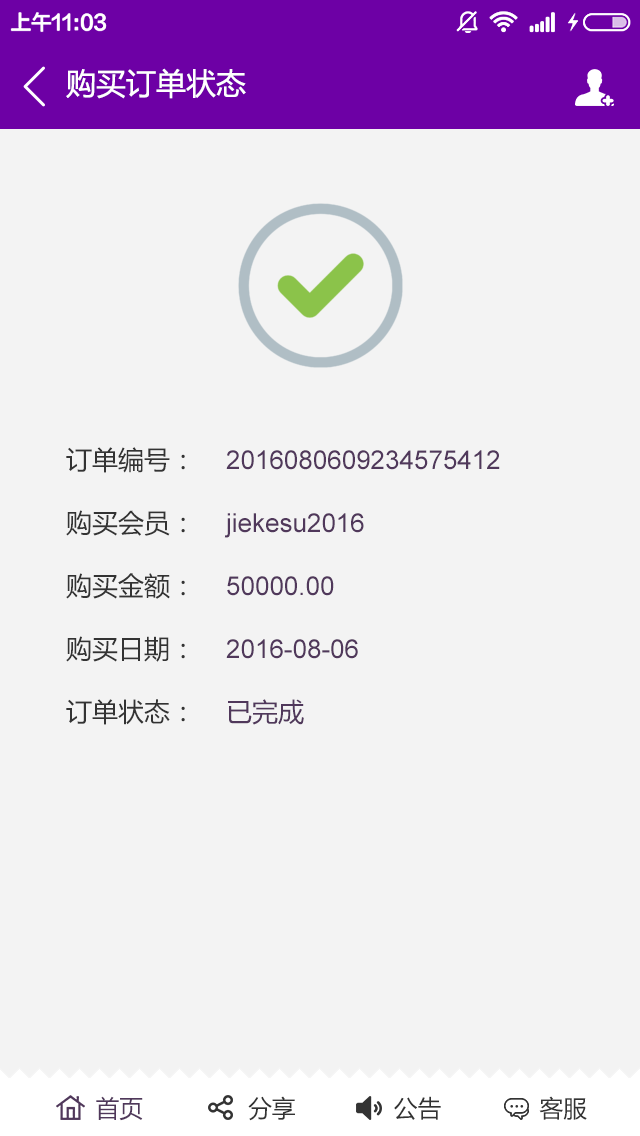
<style>
.page{position:relative;width:640px;height:1136px;background:#f3f3f3}
.page>*{position:absolute;margin:0}
.t1{font:30px "MicrosoftYaHei";color:#ffffff}
.t2{font:26px/63px "MicrosoftYaHei";color:#333333}
.t3{font:26px/63px "ArialMT";color:#50385b}
.t4{font:26px/63px "MicrosoftYaHei";color:#50385b}
.t5{font:24px "MicrosoftYaHei";color:#333333}
.t6{font:24px "MicrosoftYaHei";color:#50385b}
</style>
<div class="page">
<p class="t1" style="left:66px;top:68px;width:180px;height:31px">购买订单状态</p>
<p class="t2" style="left:66px;top:447px;width:119px;height:278px">订单编号：<br>购买会员：<br>购买金额：<br>购买日期：<br>订单状态：</p>
<p class="t3" style="left:224px;top:450px;width:276px;height:275px">2016080609234575412<br>jiekesu2016<br>50000.00<br>2016-08-06<br><span class="t4">已完成</span></p>
<p class="t5" style="left:96px;top:1096px;width:491px;height:25px"><span class="t6">首页</span>               分享              公告              客服</p>
</div>
